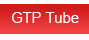
<style>
.page{position:relative;width:89px;height:40px;background:#ffffff}
.page>*{position:absolute;margin:0}
.t1{font:14.7px "ArialMT";color:#ffffff}
</style>
<div class="page">
<p class="t1" style="left:12px;top:12px;width:67px;height:11px">GTP Tube</p>
</div>
